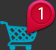
<style>
.page{position:relative;width:56px;height:50px;background:#333333}
.page>*{position:absolute;margin:0}
.t1{font:18px "MyriadPro-Regular";color:#ffffff}
</style>
<div class="page">
<p class="t1" style="left:38px;top:7px;width:5px;height:13px">1</p>
</div>
